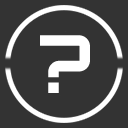
<style>
.page{position:relative;width:128px;height:128px;background:#333333}
.page>*{position:absolute;margin:0}
.t1{font:80px "Orbitron-Bold";letter-spacing:-0.01em;color:#ffffff}
</style>
<div class="page">
<p class="t1" style="left:40px;top:35px;width:50px;height:58px">?</p>
</div>
